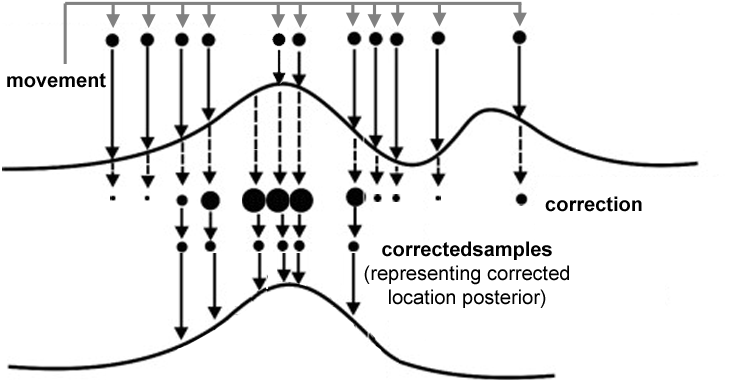
<style>
.page{position:relative;width:730px;height:380px;background:#ffffff}
.page>*{position:absolute;margin:0}
.t1{font:20px "Arial-BoldMT";color:#000000}
.t2{font:20px "ArialMT";color:#000000}
</style>
<div class="page">
<p class="t1" style="left:7px;top:73px;width:99px;height:15px">movement</p>
<p class="t1" style="left:545px;top:196px;width:97px;height:16px">correction</p>
<p class="t2" style="left:364px;top:241px;width:205px;height:67px;text-align:center"><span class="t1">correctedsamples<br></span>(representing corrected<br>location posterior)</p>
</div>
